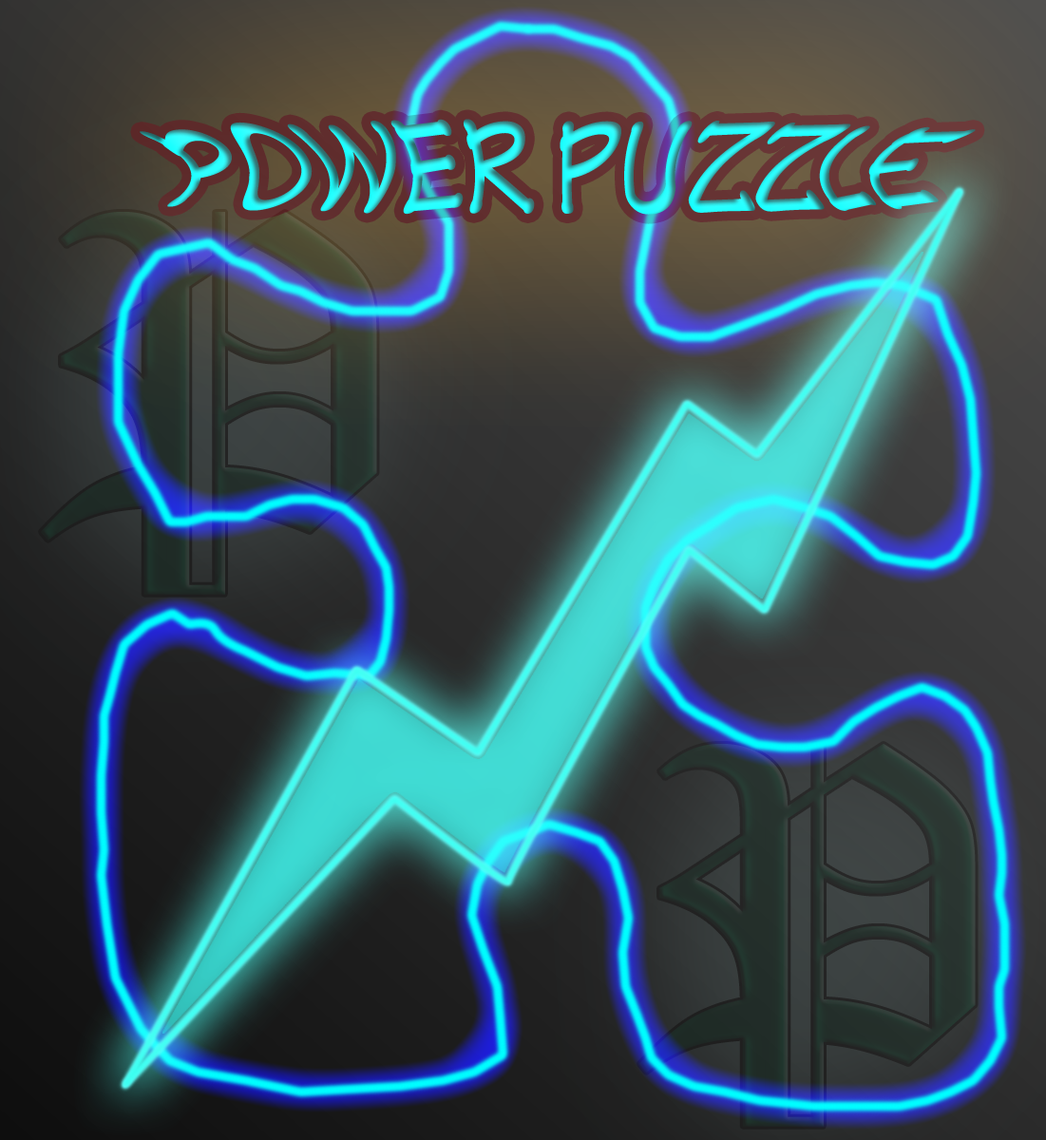
<style>
.page{position:relative;width:1046px;height:1140px}
.page>*{position:absolute;margin:0}
.t1{font:114px "TektonPro-BoldExt"}
</style>
<div class="page">
<p class="t1" style="left:140px;top:119px;width:836px;height:96px">POWER PUZZLE</p>
</div>
